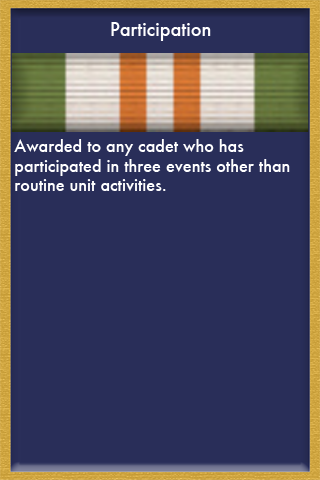
<style>
.page{position:relative;width:320px;height:480px;background:#292e59}
.page>*{position:absolute;margin:0}
.t1{font:18px "Futura-Medium";color:#ffffff}
.t2{font:16px "Futura-Medium";color:#ffffff}
</style>
<div class="page">
<p class="t1" style="left:111px;top:22px;width:100px;height:19px">Participation</p>
<p class="t2" style="left:14px;top:139px;width:276px;height:52px">Awarded to any cadet who has <br>participated in three events other than <br>routine unit activities.</p>
</div>
